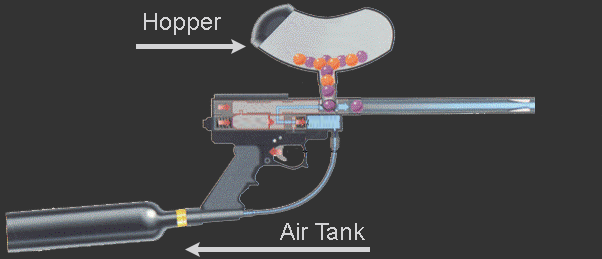
<style>
.page{position:relative;width:602px;height:259px;background:#333333}
.page>*{position:absolute;margin:0}
.t1{font:23.7px "ArialMT";color:#d4d4d6}
</style>
<div class="page">
<p class="t1" style="left:144px;top:13px;width:77px;height:22px">Hopper</p>
<p class="t1" style="left:280px;top:223px;width:85px;height:17px">Air Tank</p>
</div>
